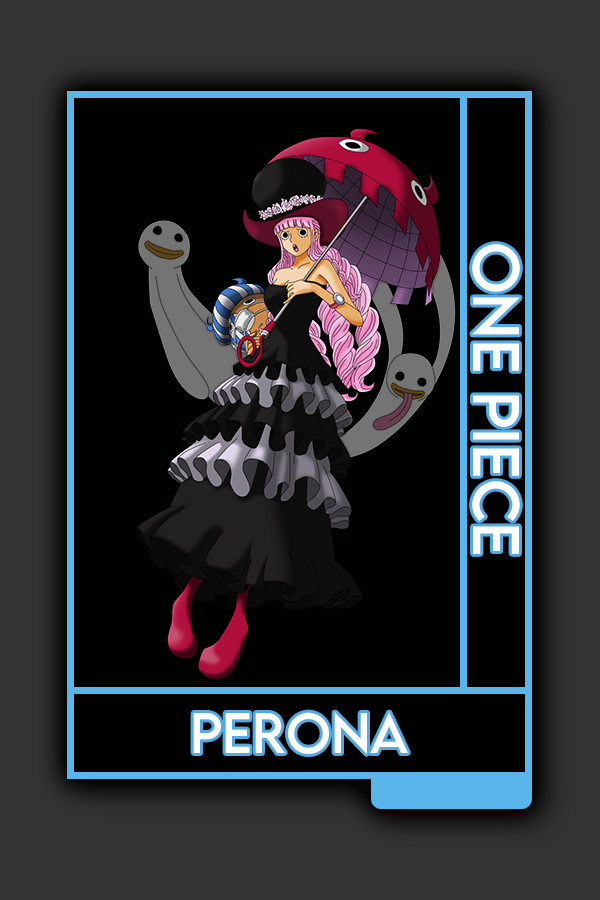
<style>
.page{position:relative;width:600px;height:900px;background:#333333}
.page>*{position:absolute;margin:0}
.t1{font:58.4px "LEMONMILK-Regular";color:#ffffff}
.t2{font:50.5px "LEMONMILK-Regular";color:#ffffff}
</style>
<div class="page">
<p class="t1" style="left:472px;top:244px;width:48px;height:310px;rotate:90deg">One Piece</p>
<p class="t2" style="left:193px;top:712px;width:215px;height:42px">Perona</p>
</div>
